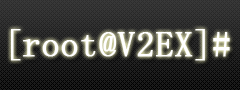
<style>
.page{position:relative;width:240px;height:90px}
.page>*{position:absolute;margin:0}
.t1{font:36px "SimSun";color:#ffffff;font-weight:bold}
</style>
<div class="page">
<p class="t1" style="left:11px;top:29px;width:219px;height:32px">[root@V2EX]#</p>
</div>
